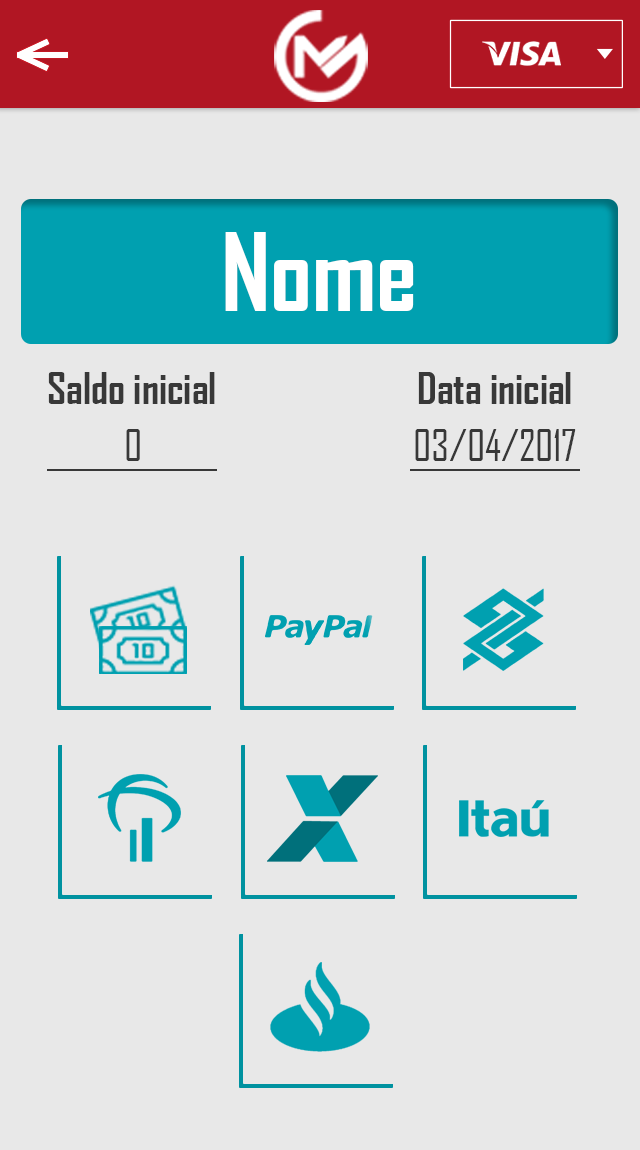
<style>
.page{position:relative;width:640px;height:1150px;background:#e8e8e8}
.page>*{position:absolute;margin:0}
.t1{font:102.5px "AgencyFB-Bold";color:#ffffff}
.t2{font:41.7px "AgencyFB-Bold";color:#383838}
.t3{font:41.7px "AgencyFB-Reg";color:#383838}
</style>
<div class="page">
<p class="t1" style="left:225px;top:232px;width:189px;height:79px">Nome</p>
<p class="t2" style="left:48px;top:372px;width:167px;height:32px">Saldo inicial</p>
<p class="t2" style="left:418px;top:372px;width:153px;height:32px">Data inicial</p>
<p class="t3" style="left:126px;top:429px;width:14px;height:32px">0</p>
<p class="t3" style="left:415px;top:429px;width:161px;height:32px">03/04/2017</p>
</div>
